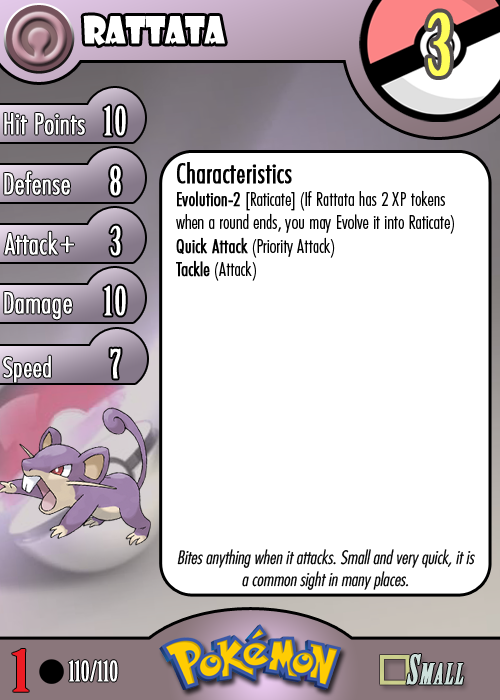
<style>
.page{position:relative;width:500px;height:700px;background:#ffffff}
.page>*{position:absolute;margin:0}
.t1{font:36.7px "ShowcardGothic-Reg";letter-spacing:-0.025em;color:#ffffff;scale:0.91 1}
.t2{font:83.3px "BirchStd";letter-spacing:0.025em;color:#fffd59;font-weight:bold}
.t3{font:27.8px "Futura-CondensedLight";color:#ffffff;font-weight:bold}
.t4{font:38.9px "BirchStd";letter-spacing:0.035em;color:#ffffff;font-weight:bold}
.t5{font:19.4px "FuturaCondensedBQ-Light";color:#010101}
.t6{font:27.8px "FuturaCondensedBQ-Light";color:#010101;font-weight:bold}
.t7{font:19.4px "FuturaCondensedBQ-Light";color:#010101;font-weight:bold}
.t8{font:30.6px "Futura-CondensedLight";color:#ffffff;font-weight:bold}
.t9{font:27.8px "FuturaCondensedBQ-Light";color:#ffffff;font-weight:bold}
.t10{font:18.1px "Futura-CondensedLight";color:#010101;font-style:italic}
.t11{font:55.6px "BirchStd";color:#ed1c24;font-weight:bold;scale:1.5 1}
.t12{font:27.8px "BirchStd";color:#ffffff;font-weight:bold}
</style>
<div class="page">
<p class="t1" style="left:83px;top:15px;width:142px;height:31px">rattata</p>
<p class="t2" style="left:428px;top:12px;width:22px;height:64px">3</p>
<p class="t3" style="left:4px;top:113px;width:81px;height:22px">Hit Points</p>
<p class="t4" style="left:104px;top:105px;width:22px;height:31px">10</p>
<p class="t3" style="left:4px;top:171px;width:66px;height:24px">Defense</p>
<p class="t4" style="left:110px;top:165px;width:11px;height:31px">8</p>
<p class="t5" style="left:176px;top:162px;width:278px;height:119px"><span class="t6">Characteristics<br></span><span class="t7">Evolution-2 </span>[Raticate] (If Rattata has 2 XP tokens when a round ends, you may Evolve it into Raticate)<br><span class="t7">Quick Attack</span> (Priority Attack)<br><span class="t7">Tackle</span> (Attack)</p>
<p class="t3" style="left:4px;top:231px;width:54px;height:24px">Attack</p>
<p class="t4" style="left:110px;top:225px;width:11px;height:31px">3</p>
<p class="t8" style="left:60px;top:236px;width:14px;height:17px">+</p>
<p class="t3" style="left:4px;top:292px;width:68px;height:28px">Damage</p>
<p class="t4" style="left:104px;top:285px;width:22px;height:31px">10</p>
<p class="t4" style="left:110px;top:348px;width:11px;height:31px">7</p>
<p class="t9" style="left:3px;top:355px;width:48px;height:28px">Speed</p>
<p class="t10" style="left:177px;top:549px;width:298px;height:41px;text-align:center">Bites anything when it attacks. Small and very quick, it is a common sight in many places.</p>
<p class="t11" style="left:12px;top:649px;width:17px;height:43px">1</p>
<p class="t12" style="left:68px;top:660px;width:50px;height:22px">110/110</p>
</div>
